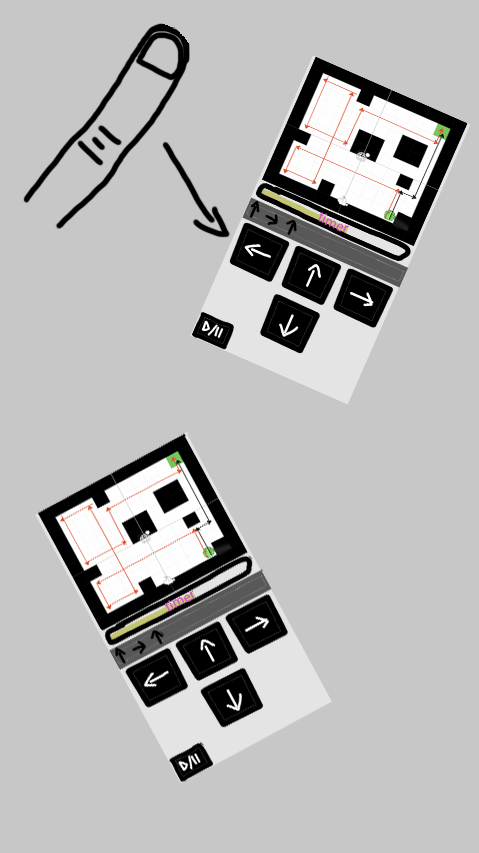
<style>
.page{position:relative;width:479px;height:853px;background:#c7c7c7}
.page>*{position:absolute;margin:0}
.t1{font:14.3px "MyriadPro-Regular";color:#d84fc6}
</style>
<div class="page">
<p class="t1" style="left:318px;top:212px;width:31px;height:20px;rotate:24deg">timer</p>
<p class="t1" style="left:164px;top:590px;width:30px;height:21px;rotate:-28deg">timer</p>
</div>
